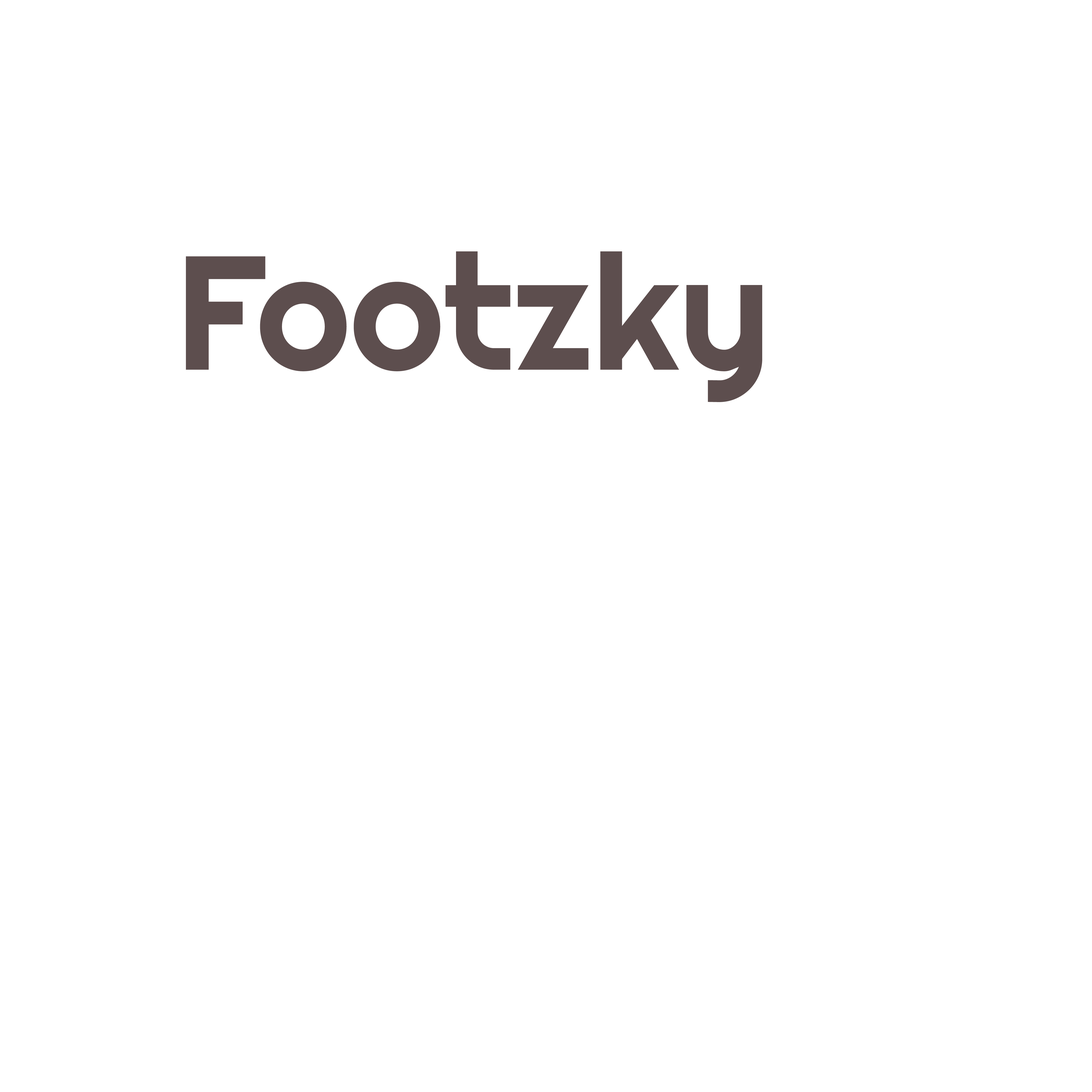
<style>
.page{position:relative;width:1092px;height:1092px;background:#ffffff}
.page>*{position:absolute;margin:0}
.t1{font:161.8px "Righteous-Regular";color:#5d4e4e}
</style>
<div class="page">
<p class="t1" style="left:186px;top:251px;width:576px;height:151px">Footzky</p>
</div>
